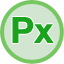
<style>
.page{position:relative;width:64px;height:64px;background:#d1e5d0}
.page>*{position:absolute;margin:0}
.t1{font:36px "HelveticaNeue-Bold";color:#1aa31d}
</style>
<div class="page">
<p class="t1" style="left:12px;top:17px;width:42px;height:26px">Px</p>
</div>
